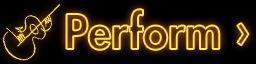
<style>
.page{position:relative;width:256px;height:64px;background:#000000}
.page>*{position:absolute;margin:0}
.t1{font:46.3px "FuturaStd-Heavy"}
</style>
<div class="page">
<p class="t1" style="left:66px;top:9px;width:183px;height:41px">Perform ›</p>
</div>
